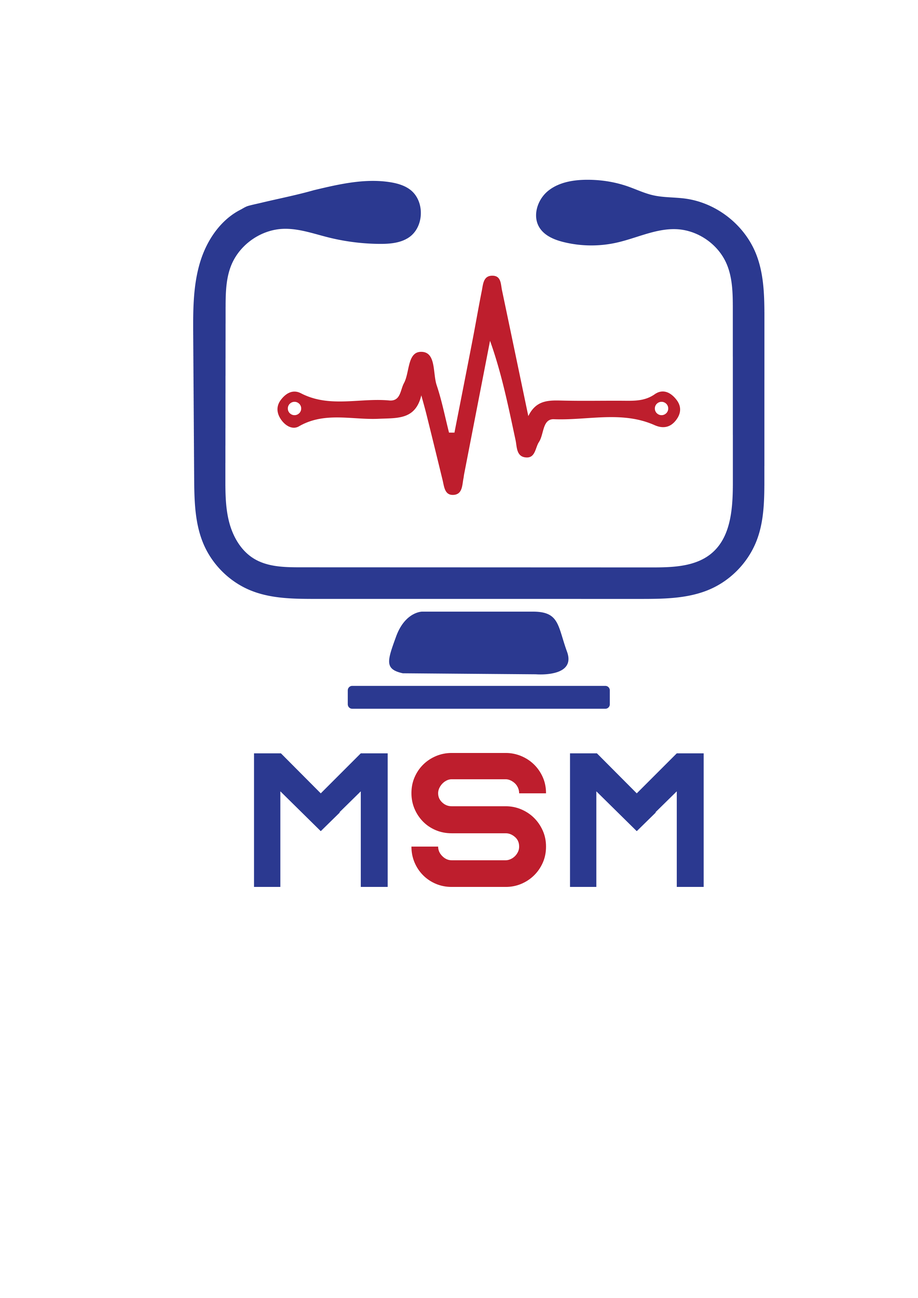
<style>
.page{position:relative;width:918px;height:1298px;background:#ffffff}
.page>*{position:absolute;margin:0}
.t1{font:188.1px "Alfphabet-IV";color:#2b3990}
.t2{font:188.1px "Alfphabet-IV";color:#be1e2d}
</style>
<div class="page">
<p class="t1" style="left:254px;top:753px;width:450px;height:134px">m<span class="t2">s</span>m</p>
</div>
